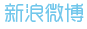
<style>
.page{position:relative;width:87px;height:29px;background:#ffffff}
.page>*{position:absolute;margin:0}
.t1{font:20px "RTWSYueGoTrial-Regular";color:#72c7eb}
</style>
<div class="page">
<p class="t1" style="left:4px;top:3px;width:80px;height:20px">新浪微博</p>
</div>
